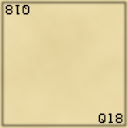
<style>
.page{position:relative;width:128px;height:128px}
.page>*{position:absolute;margin:0}
.t1{font:10.8px "KenPixel";letter-spacing:0.159em;color:#000000}
</style>
<div class="page">
<p class="t1" style="left:5px;top:4px;width:25px;height:11px;rotate:180deg">Q18</p>
<p class="t1" style="left:98px;top:113px;width:25px;height:11px">Q18</p>
</div>
